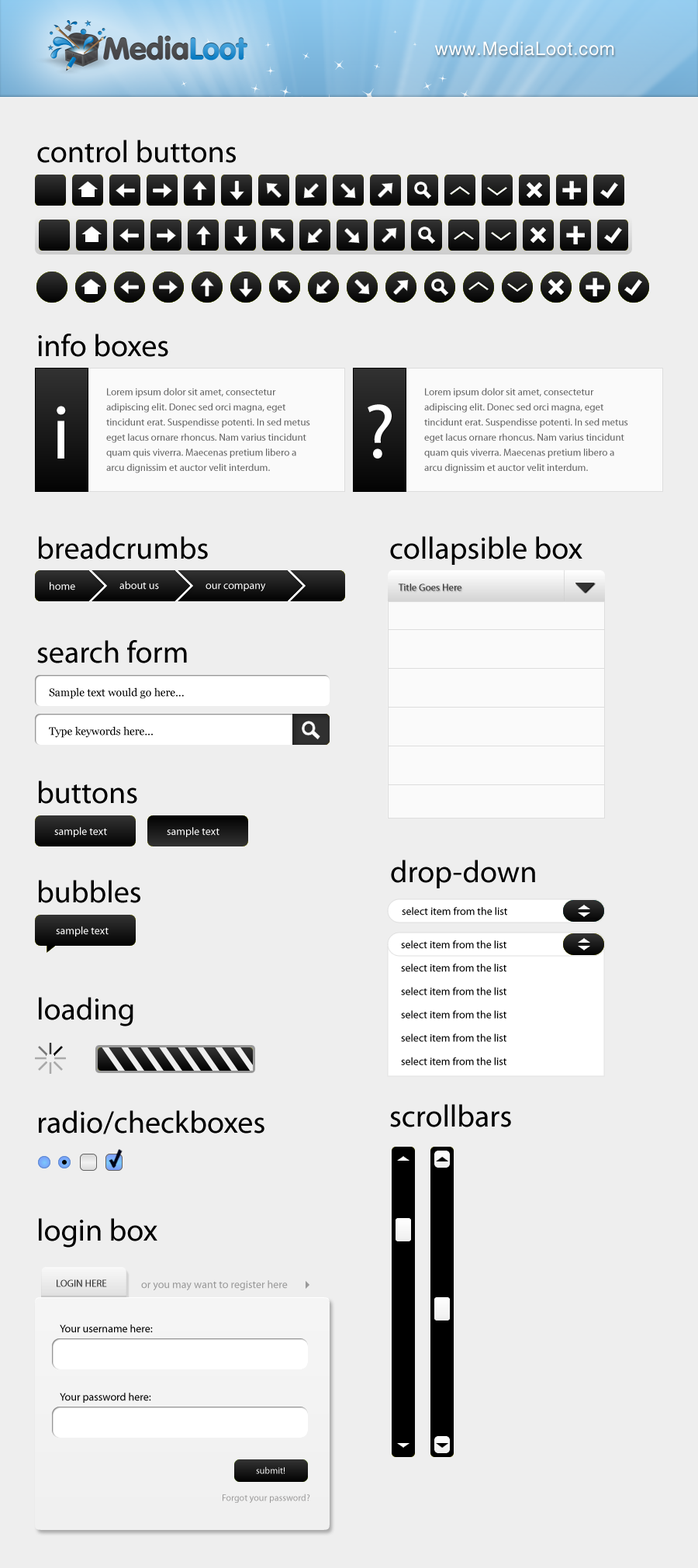
<style>
.page{position:relative;width:698px;height:1568px;background:#eeeeee}
.page>*{position:absolute;margin:0}
.t1{font:18.6px "HelveticaLTStd-Roman";letter-spacing:0.025em;color:#ffffff}
.t2{font:31px "MyriadPro-Regular";color:#000000}
.t3{font:10.1px/15.1px "MyriadPro-Regular";color:#666666}
.t4{font:77.6px "MyriadPro-Regular";color:#ffffff}
.t5{font:10.9px "MyriadPro-Regular";color:#ffffff}
.t6{font:10.1px "MyriadPro-Regular";color:#333333}
.t7{font:10.9px "Georgia";color:#000000}
.t8{font:10.9px "MyriadPro-Regular";color:#000000}
.t9{font:10.9px/23.4px "MyriadPro-Regular";color:#000000}
.t10{font:10.9px "MyriadPro-Regular";color:#999999}
.t11{font:9.3px "MyriadPro-Regular";color:#ffffff}
.t12{font:9.3px "MyriadPro-Regular";color:#989797}
</style>
<div class="page">
<p class="t1" style="left:434px;top:41px;width:180px;height:15px">www.MediaLoot.com</p>
<p class="t2" style="left:37px;top:140px;width:199px;height:23px">control buttons</p>
<p class="t2" style="left:38px;top:334px;width:130px;height:23px">info boxes</p>
<p class="t3" style="left:106px;top:388px;width:204px;height:85px">Lorem ipsum dolor sit amet, consectetur <br>adipiscing elit. Donec sed orci magna, eget <br>tincidunt erat. Suspendisse potenti. In sed metus <br>eget lacus ornare rhoncus. Nam varius tincidunt <br>quam quis viverra. Maecenas pretium libero a <br>arcu dignissim et auctor velit interdum.</p>
<p class="t3" style="left:424px;top:388px;width:204px;height:85px">Lorem ipsum dolor sit amet, consectetur <br>adipiscing elit. Donec sed orci magna, eget <br>tincidunt erat. Suspendisse potenti. In sed metus <br>eget lacus ornare rhoncus. Nam varius tincidunt <br>quam quis viverra. Maecenas pretium libero a <br>arcu dignissim et auctor velit interdum.</p>
<p class="t4" style="left:57px;top:406px;width:9px;height:53px">i</p>
<p class="t4" style="left:368px;top:404px;width:24px;height:55px">?</p>
<p class="t2" style="left:38px;top:536px;width:170px;height:23px">breadcrumbs</p>
<p class="t2" style="left:390px;top:536px;width:193px;height:29px">collapsible box</p>
<p class="t5" style="left:50px;top:582px;width:25px;height:8px">home</p>
<p class="t5" style="left:119px;top:581px;width:40px;height:9px">about us</p>
<p class="t5" style="left:206px;top:583px;width:60px;height:8px">our company</p>
<p class="t6" style="left:398px;top:583px;width:64px;height:8px">Title Goes Here</p>
<p class="t2" style="left:37px;top:640px;width:150px;height:23px">search form</p>
<p class="t7" style="left:49px;top:687px;width:135px;height:12px">Sample text would go here...</p>
<p class="t7" style="left:49px;top:726px;width:104px;height:12px">Type keywords here...</p>
<p class="t2" style="left:38px;top:781px;width:99px;height:23px">buttons</p>
<p class="t5" style="left:54px;top:827px;width:53px;height:10px">sample text</p>
<p class="t5" style="left:167px;top:827px;width:53px;height:10px">sample text</p>
<p class="t2" style="left:391px;top:860px;width:144px;height:28px">drop-down</p>
<p class="t2" style="left:38px;top:880px;width:102px;height:23px">bubbles</p>
<p class="t8" style="left:402px;top:907px;width:105px;height:9px">select item from the list</p>
<p class="t5" style="left:56px;top:926px;width:53px;height:10px">sample text</p>
<p class="t9" style="left:401px;top:940px;width:106px;height:125px">select item from the list<br>select item from the list<br>select item from the list<br>select item from the list<br>select item from the list<br>select item from the list</p>
<p class="t2" style="left:39px;top:997px;width:94px;height:29px">loading</p>
<p class="t2" style="left:390px;top:1104px;width:121px;height:23px">scrollbars</p>
<p class="t2" style="left:38px;top:1110px;width:227px;height:24px">radio/checkboxes</p>
<p class="t2" style="left:39px;top:1218px;width:118px;height:30px">login box</p>
<p class="t6" style="left:57px;top:1279px;width:50px;height:8px">LOGIN HERE</p>
<p class="t10" style="left:141px;top:1280px;width:147px;height:10px">or you may want to register here</p>
<p class="t8" style="left:60px;top:1324px;width:93px;height:9px">Your username here:</p>
<p class="t8" style="left:60px;top:1393px;width:91px;height:10px">Your password here:</p>
<p class="t11" style="left:256px;top:1466px;width:30px;height:8px">submit!</p>
<p class="t12" style="left:223px;top:1494px;width:87px;height:9px">Forgot your password?</p>
</div>
